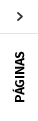
<style>
.page{position:relative;width:38px;height:121px;background:#ffffff}
.page>*{position:absolute;margin:0}
.t1{font:14px "SourceSansPro-Bold";letter-spacing:-0.02em;color:#000000;text-transform:uppercase}
</style>
<div class="page">
<p class="t1" style="left:12px;top:51px;width:13px;height:51px;rotate:-90deg">Páginas</p>
</div>
